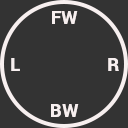
<style>
.page{position:relative;width:128px;height:128px;background:#333333}
.page>*{position:absolute;margin:0}
.t1{font:18px "Roboto-Black";letter-spacing:0.01em;color:#f7efef}
</style>
<div class="page">
<p class="t1" style="left:52px;top:11px;width:26px;height:13px">FW</p>
<p class="t1" style="left:11px;top:58px;width:9px;height:13px">L</p>
<p class="t1" style="left:108px;top:58px;width:11px;height:13px">R</p>
<p class="t1" style="left:51px;top:104px;width:28px;height:13px">BW</p>
</div>
